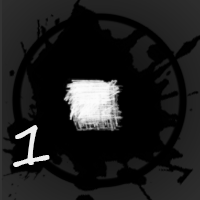
<style>
.page{position:relative;width:200px;height:200px;background:#000000}
.page>*{position:absolute;margin:0}
.t1{font:60px "SegoePrint";color:#efefef}
</style>
<div class="page">
<p class="t1" style="left:13px;top:125px;width:37px;height:42px">1</p>
</div>
